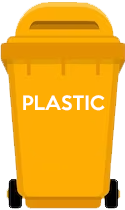
<style>
.page{position:relative;width:125px;height:210px;background:#fead03}
.page>*{position:absolute;margin:0}
.t1{font:18px "KeepCalm-Medium";color:#ffffff}
</style>
<div class="page">
<p class="t1" style="left:23px;top:95px;width:82px;height:16px">PLASTIC</p>
</div>
